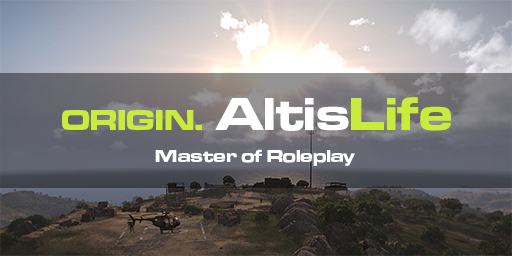
<style>
.page{position:relative;width:512px;height:256px}
.page>*{position:absolute;margin:0}
.t1{font:30px "MicrogrammaDOT-BoldExtended";color:#c9ec3c}
.t2{font:48px "MicrogrammaDOT-BoldExtended";color:#ffffff}
.t3{font:48px "MicrogrammaDOT-BoldExtended";color:#c9ec3c}
.t4{font:18px "MicrogrammaDOT-BoldExtended";color:#ffffff}
</style>
<div class="page">
<p class="t1" style="left:62px;top:97px;width:389px;height:34px">ORIGIN.<span class="t2"> Altis</span><span class="t3">Life</span></p>
<p class="t4" style="left:155px;top:149px;width:200px;height:17px">Master of Roleplay</p>
</div>
